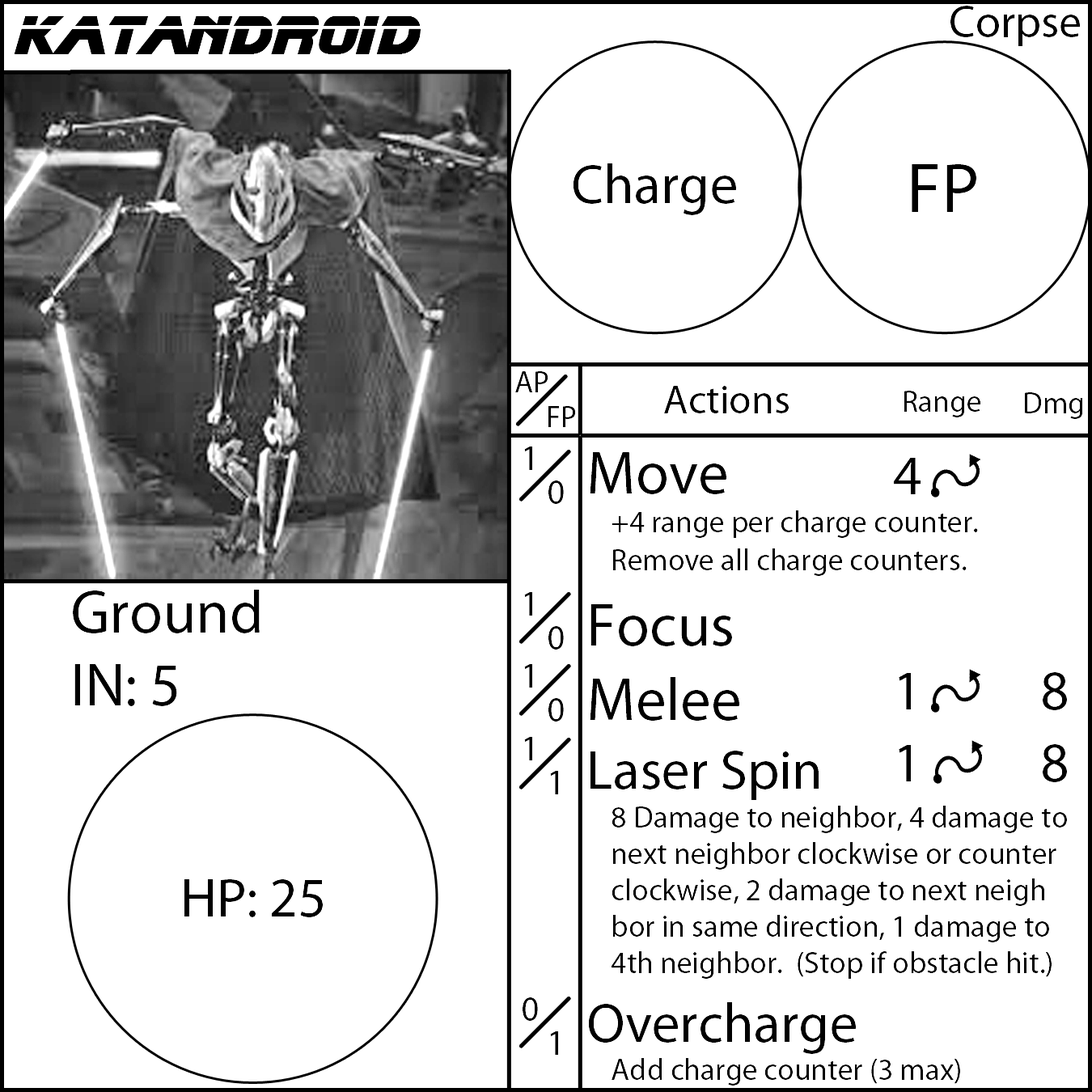
<style>
.page{position:relative;width:1092px;height:1092px;background:#ffffff}
.page>*{position:absolute;margin:0}
.t1{font:55.6px "BladeRunnerMovieFont";color:#000000}
.t2{font:55.6px "MyriadPro-Regular";color:#000000}
.t3{font:70.8px "MyriadPro-Regular";color:#000000}
.t4{font:30.3px "MyriadPro-Regular";color:#000000}
.t5{font:40.4px "MyriadPro-Regular";color:#000000}
.t6{font:35.4px "MyriadPro-Regular";color:#000000}
.t7{font:60.7px "MyriadPro-Regular";color:#000000}
</style>
<div class="page">
<p class="t1" style="left:14px;top:16px;width:407px;height:38px">Katandroid</p>
<p class="t2" style="left:573px;top:163px;width:163px;height:52px">Charge</p>
<p class="t3" style="left:912px;top:164px;width:64px;height:48px">FP</p>
<p class="t4" style="left:515px;top:371px;width:33px;height:21px">AP</p>
<p class="t5" style="left:664px;top:386px;width:125px;height:27px">Actions</p>
<p class="t4" style="left:904px;top:391px;width:77px;height:26px">Range</p>
<p class="t4" style="left:1024px;top:392px;width:59px;height:27px">Dmg</p>
<p class="t4" style="left:548px;top:406px;width:28px;height:21px">FP</p>
<p class="t6" style="left:523px;top:447px;width:15px;height:574px">1<br><br>1<br>1<br>1<br> <br><br>0</p>
<p class="t4" style="left:588px;top:452px;width:479px;height:634px"><span class="t7">Move<br></span> +4 range per charge counter.<br> Remove all charge counters.<br><span class="t7">Focus<br>Melee<br></span><span class="t2">Laser Spin<br></span> 8 Damage to neighbor, 4 damage to   next neighbor clockwise or counter   clockwise, 2 damage to next neigh    bor in same direction, 1 damage to    4th neighbor.  (Stop if obstacle hit.)<br><span class="t2">Overcharge<br></span> Add charge counter (3 max)</p>
<p class="t2" style="left:894px;top:458px;width:27px;height:323px;text-align:center">4<br><br><br>1<br>1</p>
<p class="t6" style="left:548px;top:480px;width:16px;height:575px">0<br><br>0<br>0<br>1<br> <br><br>1</p>
<p class="t7" style="left:73px;top:590px;width:187px;height:116px">Ground<br>IN: 5</p>
<p class="t2" style="left:1043px;top:672px;width:24px;height:110px;text-align:center">8<br>8</p>
<p class="t2" style="left:184px;top:879px;width:139px;height:38px">HP: 25</p>
</div>
